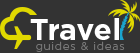
<style>
.page{position:relative;width:140px;height:53px;background:#333333}
.page>*{position:absolute;margin:0}
.t1{font:30px "Gotham-Bold";color:#ffffff}
.t2{font:11px "Gotham-Light";letter-spacing:0.075em;color:#777777}
</style>
<div class="page">
<p class="t1" style="left:30px;top:18px;width:89px;height:22px">Travel</p>
<p class="t2" style="left:36px;top:41px;width:89px;height:11px">guides &amp; ideas</p>
</div>
